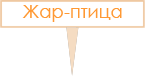
<style>
.page{position:relative;width:145px;height:76px;background:#ffffff}
.page>*{position:absolute;margin:0}
.t1{font:18px "CenturyGothic";letter-spacing:0.001em;color:#ff9933}
</style>
<div class="page">
<p class="t1" style="left:22px;top:5px;width:100px;height:17px">Жар-птица</p>
</div>
